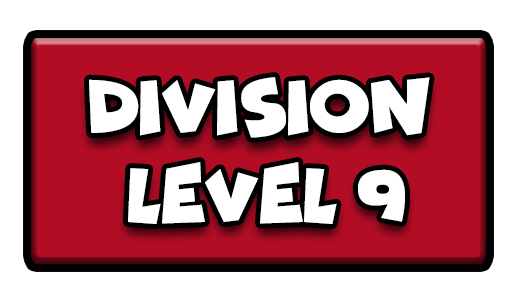
<style>
.page{position:relative;width:517px;height:301px;background:#ffffff}
.page>*{position:absolute;margin:0}
.t1{font:77.7px "Funhouse";color:#ffffff;scale:0.95 1}
</style>
<div class="page">
<p class="t1" style="left:89px;top:77px;width:341px;height:61px">DIVISION</p>
<p class="t1" style="left:128px;top:162px;width:277px;height:62px">LEVEL 9</p>
</div>
